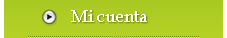
<style>
.page{position:relative;width:227px;height:38px}
.page>*{position:absolute;margin:0}
.t1{font:18px "BookAntiqua";letter-spacing:-0.02em;color:#fcfcfc}
</style>
<div class="page">
<p class="t1" style="left:71px;top:10px;width:76px;height:12px">Mi cuenta</p>
</div>
